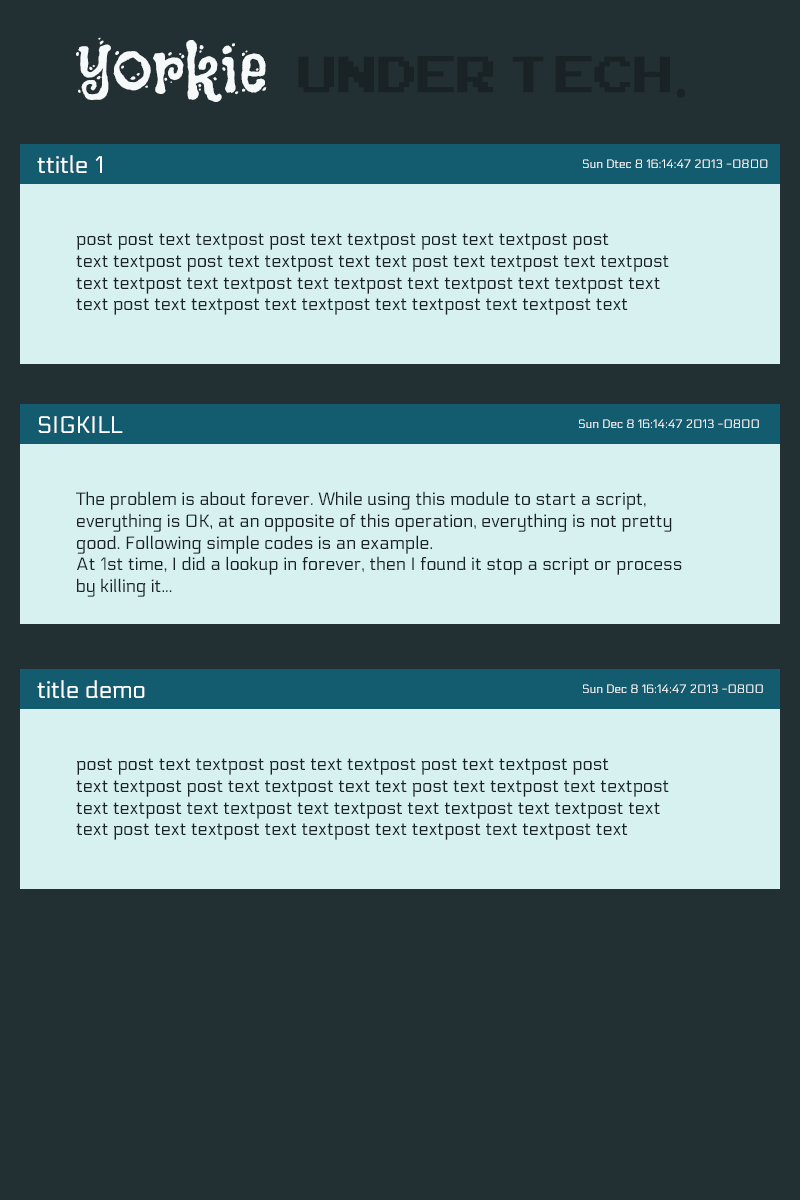
<style>
.page{position:relative;width:800px;height:1200px;background:#223034}
.page>*{position:absolute;margin:0}
.t1{font:72px "Flavors";color:#f6f9fa}
.t2{font:72px "ArcadeClassic";color:#192326}
.t3{font:72px "MyriadPro-Regular";color:#192326}
.t4{font:24px "Electrolize-Regular";color:#ffffff}
.t5{font:12px "Electrolize-Regular";color:#ffffff}
.t6{font:18px "Electrolize-Regular";color:#192326}
</style>
<div class="page">
<p class="t1" style="left:76px;top:37px;width:191px;height:65px">yorkie</p>
<p class="t2" style="left:298px;top:56px;width:388px;height:42px">Under  tECH<span class="t3">.</span></p>
<p class="t4" style="left:37px;top:155px;width:65px;height:18px">ttitle 1</p>
<p class="t5" style="left:583px;top:159px;width:185px;height:9px">Sun Dtec 8 16:14:47 2013 -0800</p>
<p class="t6" style="left:76px;top:233px;width:593px;height:82px">post post text textpost post text textpost post text textpost post<br>text textpost post text textpost text text post text textpost text textpost<br>text textpost text textpost text textpost text textpost text textpost text <br>text post text textpost text textpost text textpost text textpost text</p>
<p class="t4" style="left:38px;top:416px;width:85px;height:17px">SIGKILL</p>
<p class="t5" style="left:579px;top:419px;width:180px;height:9px">Sun Dec 8 16:14:47 2013 -0800</p>
<p class="t6" style="left:76px;top:491px;width:606px;height:106px">The problem is about forever. While using this module to start a script, <br>everything is OK, at an opposite of this operation, everything is not pretty <br>good. Following simple codes is an example.<br>At 1st time, I did a lookup in forever, then I found it stop a script or process <br>by killing it...</p>
<p class="t4" style="left:37px;top:680px;width:108px;height:18px">title demo</p>
<p class="t5" style="left:583px;top:684px;width:180px;height:9px">Sun Dec 8 16:14:47 2013 -0800</p>
<p class="t6" style="left:76px;top:758px;width:593px;height:82px">post post text textpost post text textpost post text textpost post<br>text textpost post text textpost text text post text textpost text textpost<br>text textpost text textpost text textpost text textpost text textpost text <br>text post text textpost text textpost text textpost text textpost text</p>
</div>
